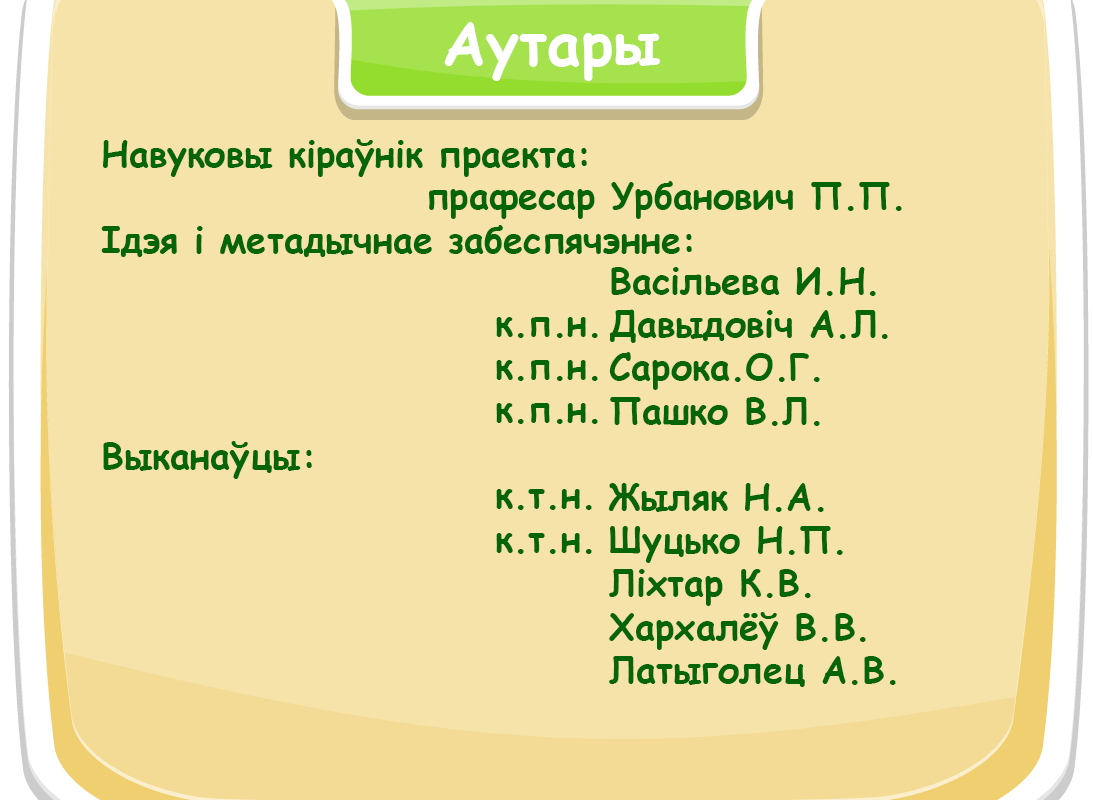
<style>
.page{position:relative;width:1093px;height:800px;background:#f5e3a9}
.page>*{position:absolute;margin:0}
.t1{font:36px "ComicSansMS-Bold";color:#066509}
</style>
<div class="page">
<p class="t1" style="left:101px;top:139px;width:591px;height:340px">Навуковы кіраўнік праекта:<br><br>Iдэя i метадычнае забеспячэнне:<br><br><br><br><br>Выканаўцы:</p>
<p class="t1" style="left:429px;top:181px;width:473px;height:38px">прафесар Урбанович П.П.</p>
<p class="t1" style="left:608px;top:267px;width:288px;height:420px">Васiльева И.Н.<br>Давыдовiч А.Л.<br>Сарока.О.Г.<br>Пашко В.Л.<br><br>Жыляк Н.А.<br>Шуцько Н.П.<br>Лiхтар К.В.<br>Хархалёў В.В.<br>Латыголец А.В.</p>
<p class="t1" style="left:496px;top:317px;width:102px;height:237px">к.п.н.<br>к.п.н.<br>к.п.н.<br><br>к.т.н.<br>к.т.н.</p>
</div>
